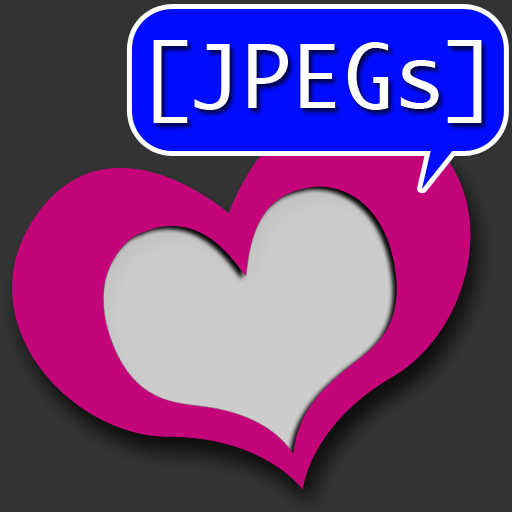
<style>
.page{position:relative;width:512px;height:512px;background:#333333}
.page>*{position:absolute;margin:0}
.t1{font:84.9px "Monaco";color:#ffffff}
</style>
<div class="page">
<p class="t1" style="left:153px;top:40px;width:329px;height:83px">[JPEGs]</p>
</div>
